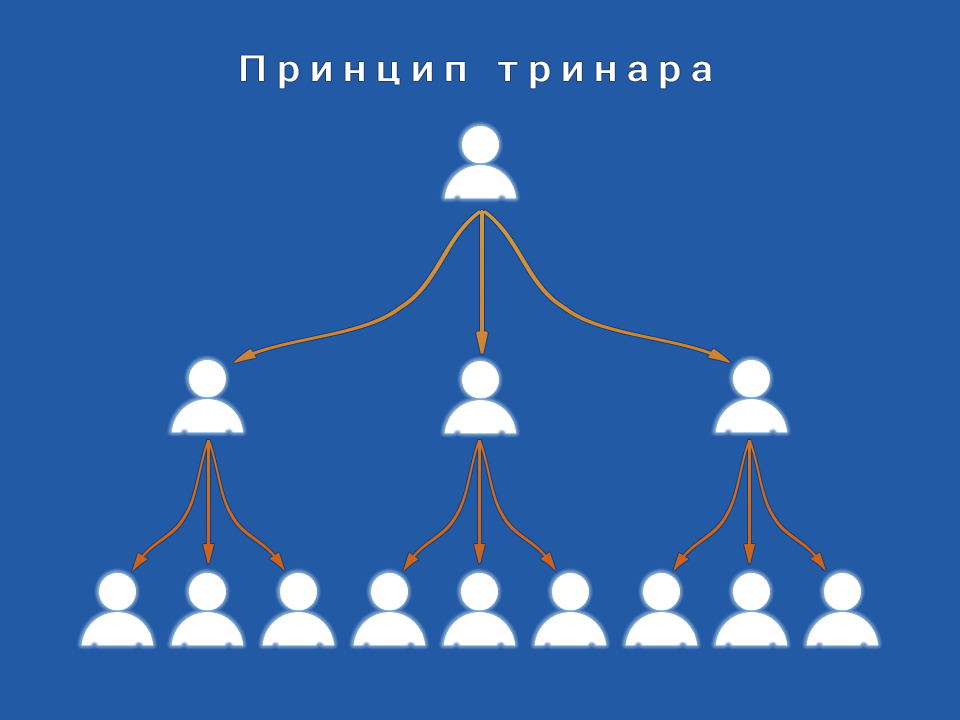
<style>
.page{position:relative;width:960px;height:720px;background:#235aa5}
.page>*{position:absolute;margin:0}
.t1{font:37.3px "Roboto-Condensed";letter-spacing:0.2em;color:#ffffff;font-variant:small-caps;scale:1.3 1}
</style>
<div class="page">
<p class="t1" style="left:241px;top:55px;width:470px;height:34px">Принцип тринара</p>
</div>
